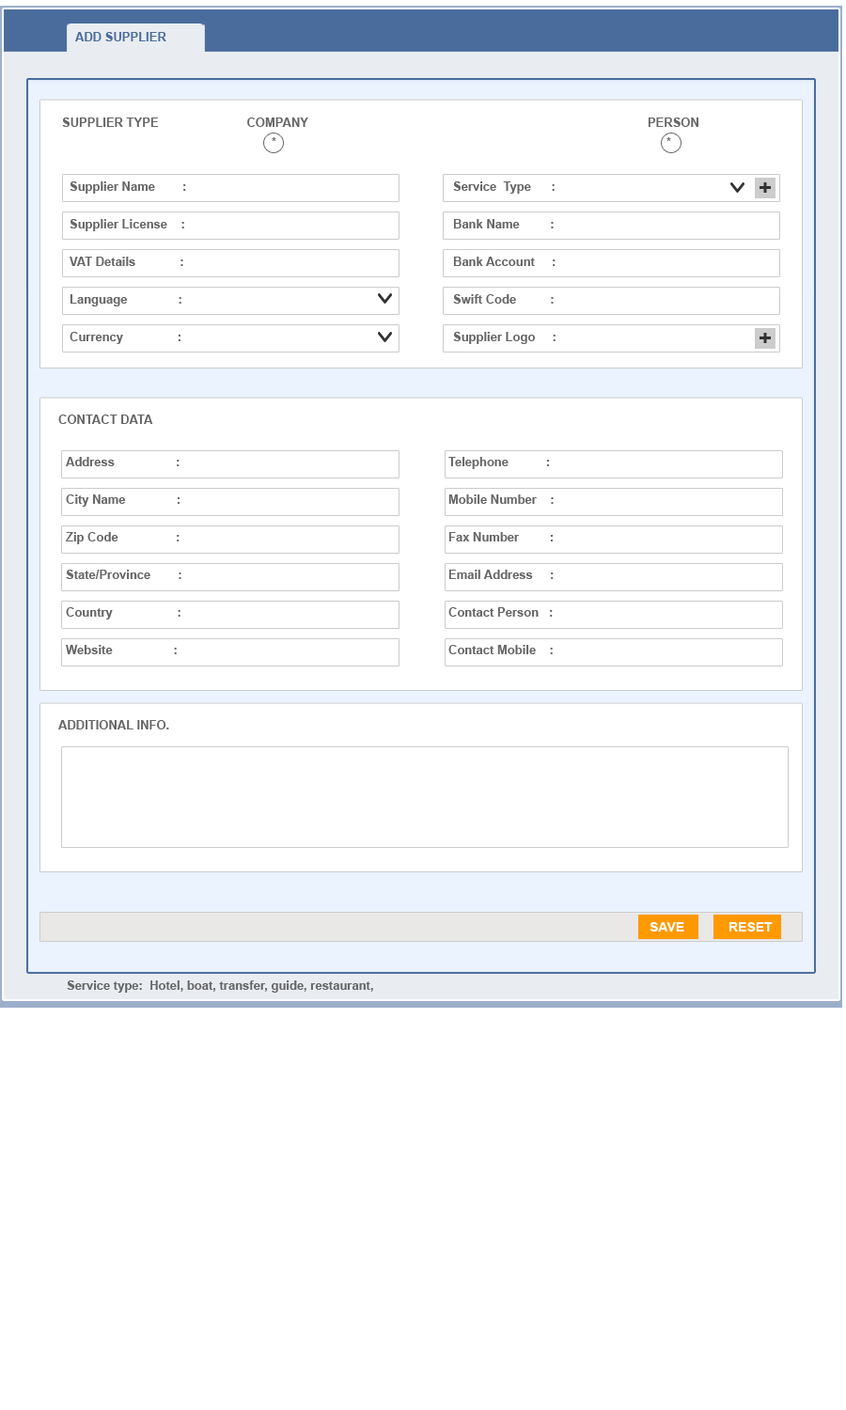
<style>
.page{position:relative;width:846px;height:1410px;background:#ffffff}
.page>*{position:absolute;margin:0}
.t1{font:12.2px "Arial-BoldMT";color:#4a6c9c}
.t2{font:12.2px "Arial-BoldMT";color:#666666}
.t3{font:12.2px/37.6px "Arial-BoldMT";color:#666666}
.t4{font:22.6px "Arial-BoldMT";color:#333333}
.t5{font:13.2px "Arial-BoldMT";color:#ffffff}
</style>
<div class="page">
<p class="t1" style="left:75px;top:32px;width:91px;height:9px">ADD SUPPLIER</p>
<p class="t2" style="left:62px;top:117px;width:636px;height:10px">SUPPLIER TYPE                          COMPANY                                                                                                    PERSON</p>
<p class="t2" style="left:272px;top:137px;width:4px;height:4px">*</p>
<p class="t2" style="left:666px;top:137px;width:5px;height:4px">*</p>
<p class="t3" style="left:70px;top:181px;width:116px;height:163px;text-align:justify">Supplier Name        :<br>Supplier License    : <br>VAT Details             : <br>Language               : <br>Currency                :</p>
<p class="t3" style="left:453px;top:181px;width:102px;height:163px;text-align:justify">Service  Type      :<br>Bank Name         :<br>Bank Account     :<br>Swift Code          :<br>Supplier Logo     :</p>
<p class="t4" style="left:759px;top:182px;width:12px;height:11px">+</p>
<p class="t4" style="left:759px;top:333px;width:12px;height:10px">+</p>
<p class="t2" style="left:58px;top:414px;width:95px;height:10px">CONTACT DATA</p>
<p class="t3" style="left:66px;top:457px;width:115px;height:197px;text-align:justify">Address                  :<br>City Name               :<br>Zip Code                 :<br>State/Province        :<br>Country                   : <br>Website                  :</p>
<p class="t3" style="left:448px;top:457px;width:106px;height:197px;text-align:justify">Telephone           :<br>Mobile Number    :<br>Fax Number         :<br>Email Address     :<br>Contact Person   : <br>Contact Mobile    :</p>
<p class="t2" style="left:58px;top:720px;width:111px;height:9px">ADDITIONAL INFO.</p>
<p class="t5" style="left:649px;top:922px;width:35px;height:9px">SAVE</p>
<p class="t5" style="left:728px;top:922px;width:45px;height:9px">RESET</p>
<p class="t2" style="left:67px;top:980px;width:306px;height:12px">Service type:  Hotel, boat, transfer, guide, restaurant,</p>
</div>
